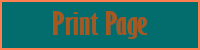
<style>
.page{position:relative;width:200px;height:50px;background:#036d6d}
.page>*{position:absolute;margin:0}
.t1{font:30px "GillSansMT-ExtraCondensedBold";color:#a7581f;scale:1.33 1}
</style>
<div class="page">
<p class="t1" style="left:53px;top:11px;width:94px;height:28px">Print Page</p>
</div>
